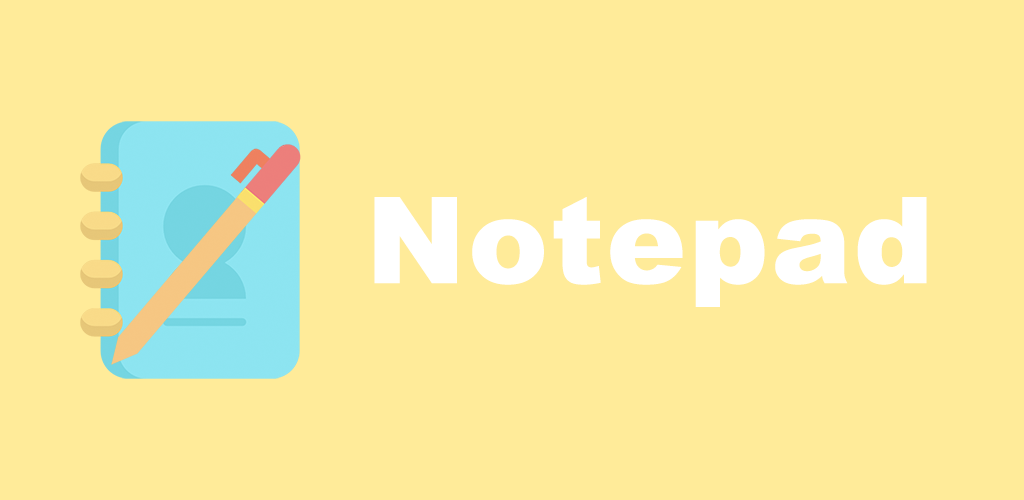
<style>
.page{position:relative;width:1024px;height:500px;background:#ffeb99}
.page>*{position:absolute;margin:0}
.t1{font:120px "Arial-Black";letter-spacing:0.02em;color:#ffffff}
</style>
<div class="page">
<p class="t1" style="left:374px;top:197px;width:553px;height:110px">Notepad</p>
</div>
